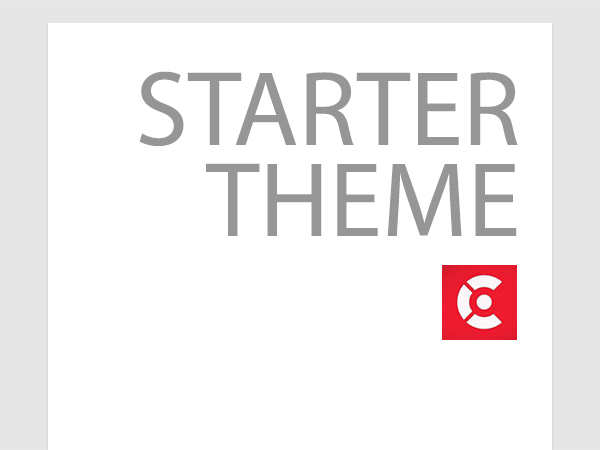
<style>
.page{position:relative;width:600px;height:450px;background:#ffffff}
.page>*{position:absolute;margin:0}
.t1{font:106.8px/91px "MyriadPro-Regular";color:#979696;text-transform:uppercase}
</style>
<div class="page">
<p class="t1" style="left:139px;top:71px;width:379px;height:165px;text-align:right">Starter<br>THEME</p>
</div>
